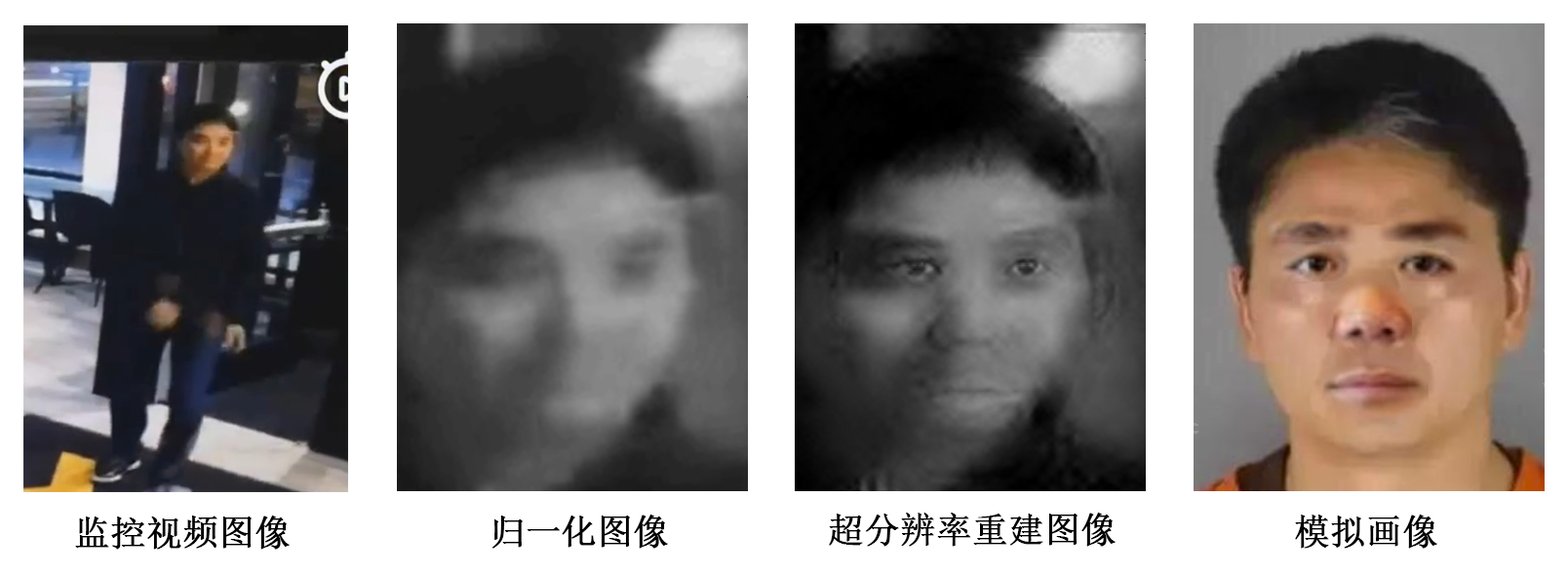
<style>
.page{position:relative;width:1568px;height:574px;background:#ffffff}
.page>*{position:absolute;margin:0}
.t1{font:35.1px "SimSun";color:#000000;font-weight:bold}
</style>
<div class="page">
<p class="t1" style="left:75px;top:516px;width:215px;height:34px">监控视频图像</p>
<p class="t1" style="left:491px;top:515px;width:177px;height:34px">归一化图像</p>
<p class="t1" style="left:829px;top:513px;width:287px;height:34px">超分辨率重建图像</p>
<p class="t1" style="left:1295px;top:515px;width:142px;height:34px">模拟画像</p>
</div>
